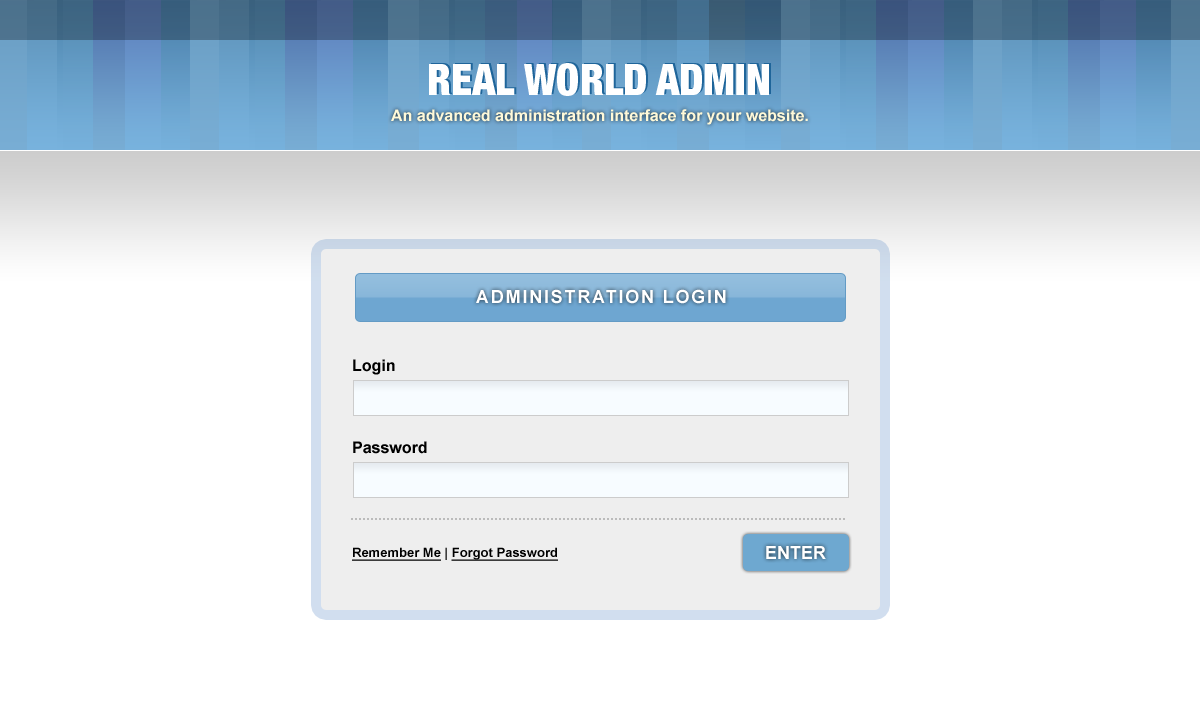
<style>
.page{position:relative;width:1200px;height:727px;background:#ffffff}
.page>*{position:absolute;margin:0}
.t1{font:16px "Arial-BoldMT";color:#fff9d8}
.t2{font:18px "Arial-BoldMT";letter-spacing:0.1em;color:#ffffff;text-transform:uppercase}
.t3{font:16px "Arial-BoldMT";color:#000000}
.t4{font:13px "Arial-BoldMT";color:#000000;text-decoration:underline}
.t5{font:13px "Arial-BoldMT";color:#000000}
.t6{font:18px "Arial-BoldMT";color:#ffffff;text-transform:uppercase}
</style>
<div class="page">
<p class="t1" style="left:391px;top:109px;width:417px;height:16px">An advanced administration interface for your website.</p>
<p class="t2" style="left:476px;top:289px;width:250px;height:15px">Administration Login</p>
<p class="t3" style="left:353px;top:359px;width:42px;height:16px">Login</p>
<p class="t3" style="left:353px;top:441px;width:74px;height:13px">Password</p>
<p class="t4" style="left:352px;top:547px;width:206px;height:14px">Remember Me<span class="t5"> | </span>Forgot Password</p>
<p class="t6" style="left:766px;top:546px;width:60px;height:13px">Enter</p>
</div>
